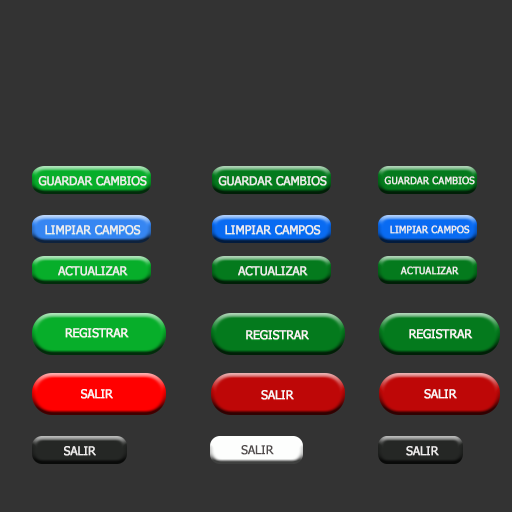
<style>
.page{position:relative;width:512px;height:512px;background:#333333}
.page>*{position:absolute;margin:0}
.t1{font:12px "Tahoma";color:#ffffff;font-weight:bold;scale:0.96 1}
.t2{font:10px "Tahoma";color:#ffffff;font-weight:bold;scale:0.96 1}
.t3{font:12px "Tahoma";color:#514c4c;font-weight:bold;scale:0.96 1}
</style>
<div class="page">
<p class="t1" style="left:38px;top:176px;width:109px;height:10px">GUARDAR CAMBIOS</p>
<p class="t1" style="left:218px;top:176px;width:109px;height:10px">GUARDAR CAMBIOS</p>
<p class="t2" style="left:384px;top:176px;width:91px;height:9px">GUARDAR CAMBIOS</p>
<p class="t1" style="left:45px;top:225px;width:96px;height:10px">LIMPIAR CAMPOS</p>
<p class="t1" style="left:225px;top:225px;width:96px;height:10px">LIMPIAR CAMPOS</p>
<p class="t2" style="left:390px;top:225px;width:80px;height:9px">LIMPIAR CAMPOS</p>
<p class="t1" style="left:58px;top:266px;width:70px;height:10px">ACTUALIZAR</p>
<p class="t1" style="left:238px;top:266px;width:70px;height:10px">ACTUALIZAR</p>
<p class="t2" style="left:400px;top:266px;width:59px;height:9px">ACTUALIZAR</p>
<p class="t1" style="left:65px;top:328px;width:64px;height:10px">REGISTRAR</p>
<p class="t1" style="left:409px;top:329px;width:64px;height:10px">REGISTRAR</p>
<p class="t1" style="left:246px;top:330px;width:63px;height:10px">REGISTRAR</p>
<p class="t1" style="left:81px;top:389px;width:32px;height:10px">SALIR</p>
<p class="t1" style="left:261px;top:390px;width:33px;height:10px">SALIR</p>
<p class="t1" style="left:424px;top:389px;width:33px;height:10px">SALIR</p>
<p class="t1" style="left:64px;top:446px;width:32px;height:10px">SALIR</p>
<p class="t3" style="left:241px;top:445px;width:33px;height:10px">SALIR</p>
<p class="t1" style="left:406px;top:446px;width:33px;height:10px">SALIR</p>
</div>
